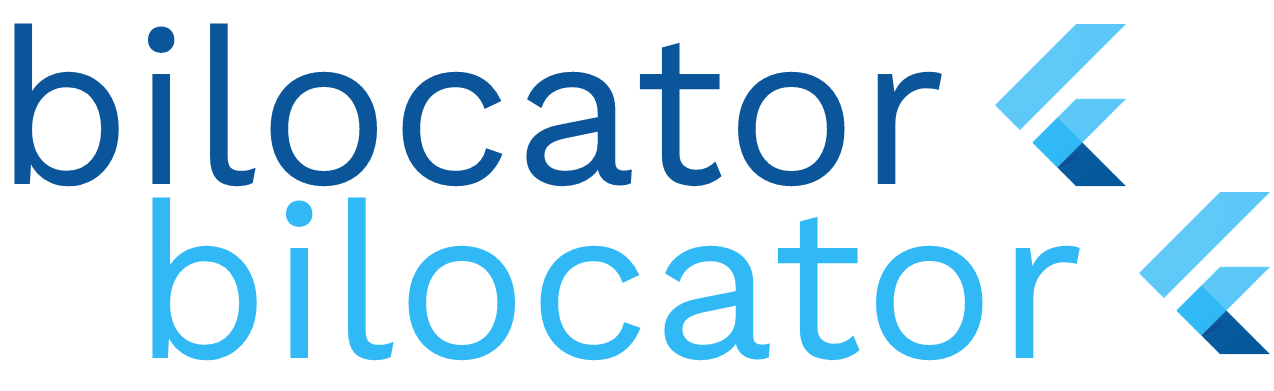
<style>
.page{position:relative;width:1274px;height:391px;background:#ffffff}
.page>*{position:absolute;margin:0}
.t1{font:220px "WorkSans-Regular";color:#0b569b}
.t2{font:220px "WorkSans-Regular";color:#31b9f6}
</style>
<div class="page">
<p class="t1" style="left:14px;top:23px;width:928px;height:164px">bilocator</p>
<p class="t2" style="left:152px;top:197px;width:928px;height:164px">bilocator</p>
</div>
